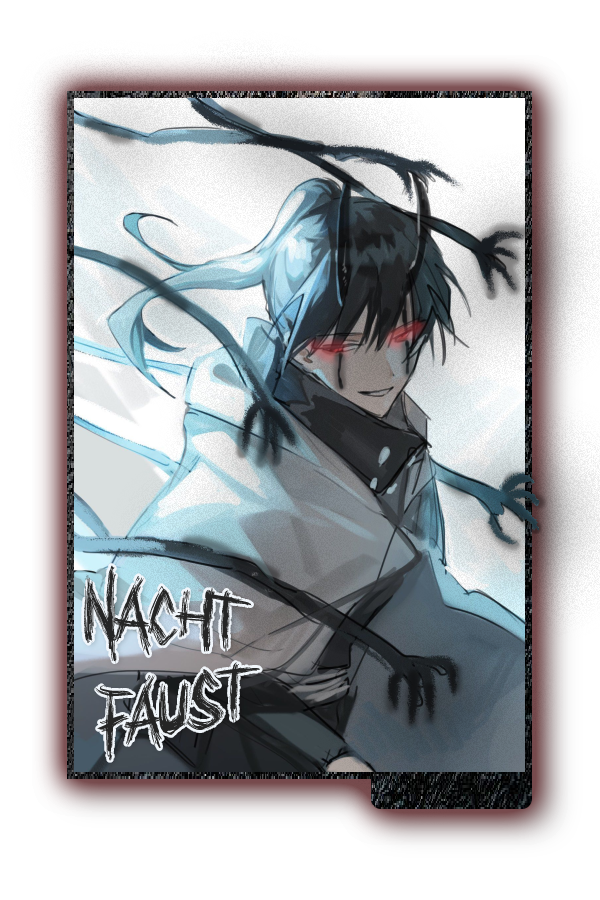
<style>
.page{position:relative;width:600px;height:900px;background:#ffffff}
.page>*{position:absolute;margin:0}
.t1{font:74px "Bruttall";color:#252525}
</style>
<div class="page">
<p class="t1" style="left:83px;top:565px;width:178px;height:196px;text-align:center">Nacht <br>Faust</p>
</div>
